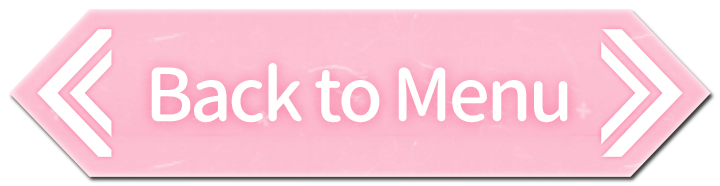
<style>
.page{position:relative;width:720px;height:186px;background:#ffffff}
.page>*{position:absolute;margin:0}
.t1{font:72.9px "GenJyuuGothicX-Medium";letter-spacing:-0.05em;color:#ffffff}
</style>
<div class="page">
<p class="t1" style="left:151px;top:63px;width:417px;height:60px">Back to Menu</p>
</div>
